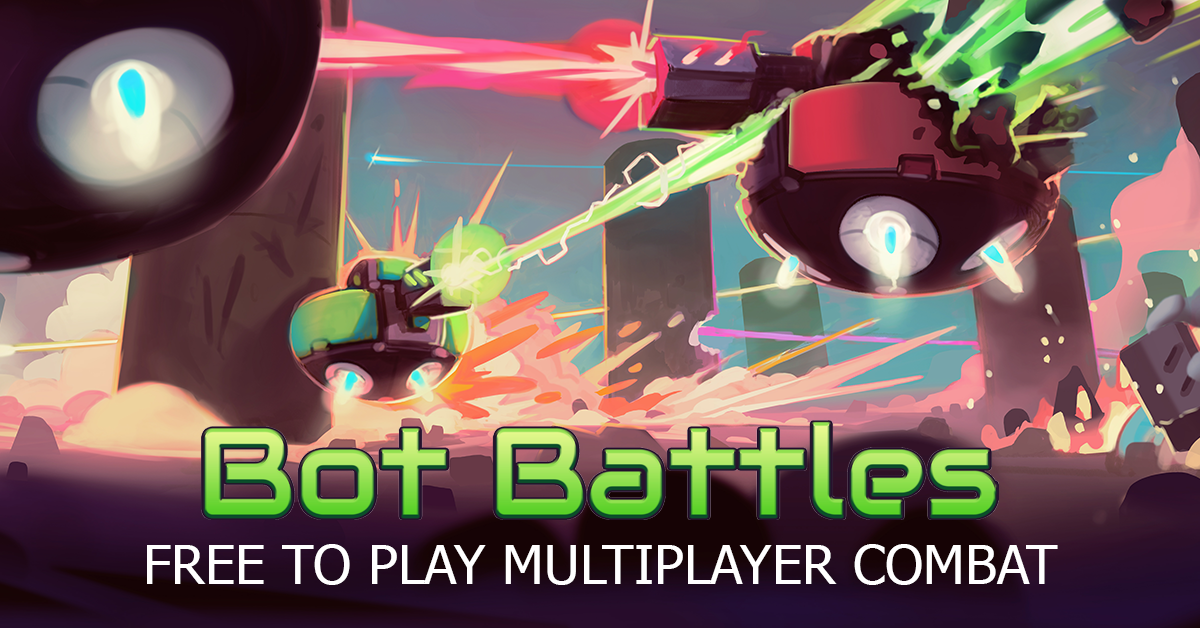
<style>
.page{position:relative;width:1200px;height:628px}
.page>*{position:absolute;margin:0}
.t1{font:54.2px "Tahoma";color:#ffffff}
</style>
<div class="page">
<p class="t1" style="left:147px;top:544px;width:911px;height:41px">FREE TO PLAY MULTIPLAYER COMBAT</p>
</div>
